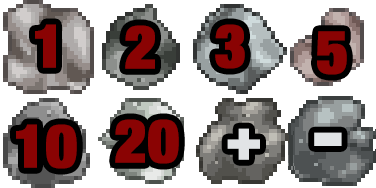
<style>
.page{position:relative;width:376px;height:188px;background:#ffffff}
.page>*{position:absolute;margin:0}
.t1{font:60px "HelveticaNeue-CondensedBlack";color:#8a0303;font-weight:bold}
.t2{font:60px "HelveticaNeue-CondensedBlack";color:#e1e4e6;font-weight:bold}
.t3{font:80px "HelveticaNeue-CondensedBlack";color:#e1e4e6;font-weight:bold}
</style>
<div class="page">
<p class="t1" style="left:35px;top:24px;width:21px;height:44px">1</p>
<p class="t1" style="left:125px;top:25px;width:30px;height:44px">2</p>
<p class="t1" style="left:215px;top:24px;width:30px;height:45px">3</p>
<p class="t1" style="left:317px;top:31px;width:30px;height:44px">5</p>
<p class="t1" style="left:16px;top:124px;width:61px;height:45px">10</p>
<p class="t1" style="left:115px;top:119px;width:64px;height:45px">20</p>
<p class="t2" style="left:227px;top:128px;width:33px;height:32px">+</p>
<p class="t3" style="left:314px;top:132px;width:28px;height:14px">-</p>
</div>
